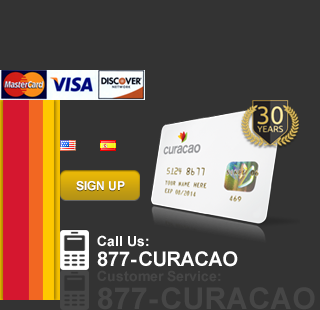
<style>
.page{position:relative;width:320px;height:310px;background:#333333}
.page>*{position:absolute;margin:0}
.t1{font:12px "Arial-BoldMT";color:#ffffff}
.t2{font:14px/24px "Arial-BoldMT";color:#ffffff}
.t3{font:20px/20px "Arial-BoldMT";color:#ffffff}
.t4{font:20px/20px "Arial-BoldMT";letter-spacing:0.075em;color:#ffffff}
.t5{font:14px/24px "Arial-BoldMT";color:#464646}
.t6{font:30px/28px "Arial-BoldMT";color:#464646}
.t7{font:30px/28px "Arial-BoldMT";letter-spacing:0.075em;color:#464646}
</style>
<div class="page">
<p class="t1" style="left:76px;top:181px;width:49px;height:10px">SIGN UP</p>
<p class="t2" style="left:97px;top:235px;width:141px;height:32px">Call Us:<br><span class="t3">877</span><span class="t4">-</span><span class="t3">CURACAO</span></p>
<p class="t5" style="left:97px;top:270px;width:218px;height:40px">Customer Service:<br><span class="t6">877</span><span class="t7">-</span><span class="t6">CURACAO</span></p>
</div>
